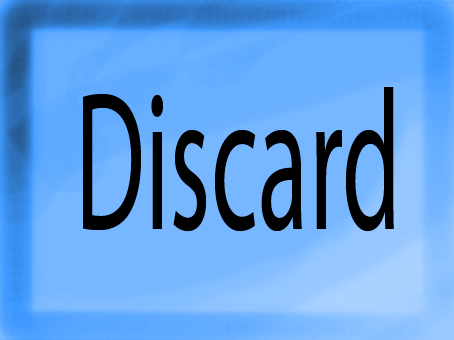
<style>
.page{position:relative;width:454px;height:340px}
.page>*{position:absolute;margin:0}
.t1{font:199.5px "MyriadPro-Regular";color:#000000;scale:0.53 1}
</style>
<div class="page">
<p class="t1" style="left:83px;top:87px;width:311px;height:145px">Discard</p>
</div>
